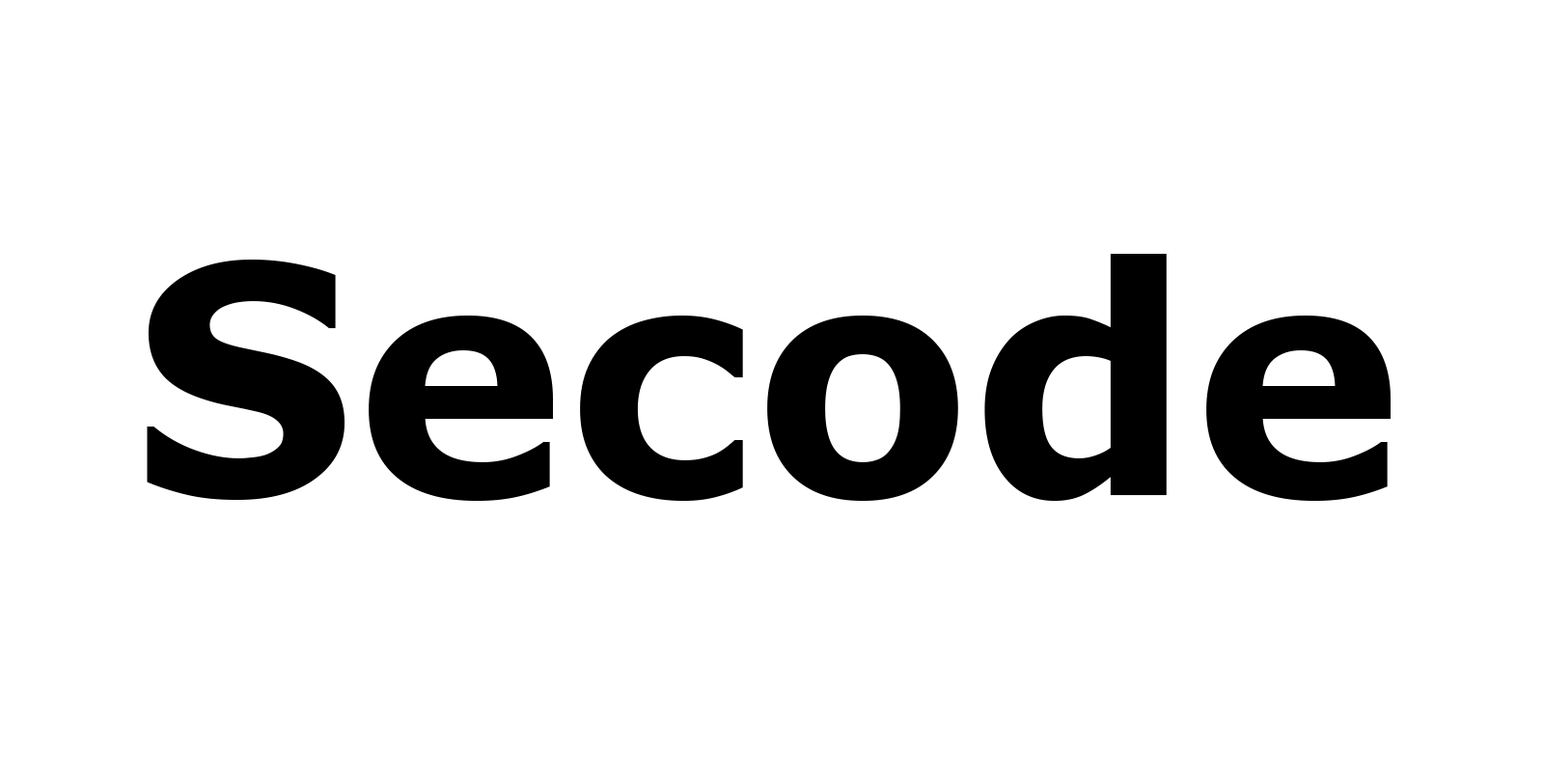
<style>
.page{position:relative;width:1544px;height:772px;background:#ffffff}
.page>*{position:absolute;margin:0}
.t1{font:317.6px "Verdana-Bold";color:#000000}
</style>
<div class="page">
<p class="t1" style="left:147px;top:254px;width:1244px;height:247px">Secode</p>
</div>
